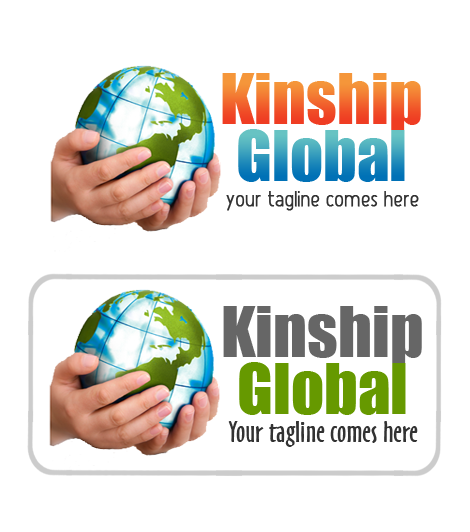
<style>
.page{position:relative;width:470px;height:532px;background:#ffffff}
.page>*{position:absolute;margin:0}
.t1{font:65px "Impact"}
.t2{font:17.6px "Atype1";color:#323232;font-weight:bold;scale:1.17 1}
.t3{font:65px "Impact";color:#666666}
.t4{font:65px "Impact";color:#669900}
.t5{font:27.6px "OzHandicraftBT-Roman";color:#323232;scale:1.17 1}
</style>
<div class="page">
<p class="t1" style="left:222px;top:73px;width:199px;height:57px">Kinship</p>
<p class="t1" style="left:238px;top:129px;width:167px;height:53px">Global</p>
<p class="t2" style="left:226px;top:191px;width:193px;height:20px">Your tagline comes here</p>
<p class="t3" style="left:223px;top:306px;width:199px;height:57px">Kinship</p>
<p class="t4" style="left:239px;top:362px;width:167px;height:53px">Global</p>
<p class="t5" style="left:228px;top:421px;width:190px;height:26px">Your tagline comes here</p>
</div>
